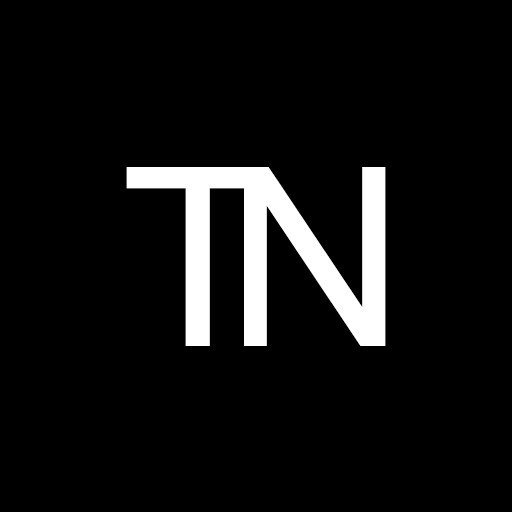
<style>
.page{position:relative;width:512px;height:512px;background:#000000}
.page>*{position:absolute;margin:0}
.t1{font:250px "ArialMT";color:#ffffff}
</style>
<div class="page">
<p class="t1" style="left:126px;top:167px;width:143px;height:179px">T</p>
<p class="t1" style="left:244px;top:167px;width:142px;height:179px">N</p>
</div>
